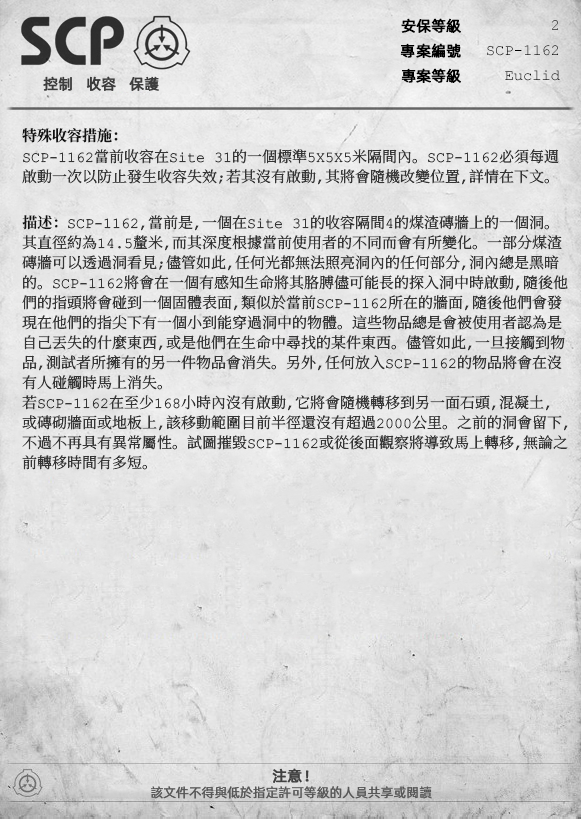
<style>
.page{position:relative;width:581px;height:819px}
.page>*{position:absolute;margin:0}
.t1{font:15px "AlibabaPuHuiTiR";color:#000000;font-weight:bold}
.t2{font:15px "AlibabaPuHuiTiR";color:#3d3d3d;font-weight:bold}
.t3{font:15px "ContainmentBreach-Bold";color:#121212}
.t4{font:15px/20px "ContainmentBreach-Regular";color:#353535}
.t5{font:15px/20px "ContainmentBreach-Bold";color:#121212}
.t6{font:15px "AlibabaPuHuiTiR";color:#414141;font-weight:bold}
.t7{font:13px "AlibabaPuHuiTiR";color:#575757}
</style>
<div class="page">
<p class="t1" style="left:401px;top:18px;width:60px;height:15px">安保等級</p>
<p class="t1" style="left:400px;top:43px;width:61px;height:15px">專案編號</p>
<p class="t2" style="left:43px;top:76px;width:116px;height:15px">控制   收容   保護</p>
<p class="t1" style="left:401px;top:68px;width:60px;height:15px">專案等級</p>
<p class="t3" style="left:22px;top:128px;width:96px;height:15px">特殊收容措施：</p>
<p class="t4" style="left:22px;top:149px;width:537px;height:36px">SCP-1162當前收容在Site 31的一個標準5X5X5米隔間內。SCP-1162必須每週<br>啟動一次以防止發生收容失效；若其沒有啟動，其將會隨機改變位置，詳情在下文。</p>
<p class="t4" style="left:22px;top:215px;width:546px;height:255px"><span class="t5">描述：</span>SCP-1162，當前是，一個在Site 31的收容隔間4的煤渣磚牆上的一個洞。<br>其直徑約為14.5釐米，而其深度根據當前使用者的不同而會有所變化。一部分煤渣<br>磚牆可以透過洞看見；儘管如此，任何光都無法照亮洞內的任何部分，洞內總是黑暗<br>的。SCP-1162將會在一個有感知生命將其胳膊儘可能長的探入洞中時啟動，隨後他<br>們的指頭將會碰到一個固體表面，類似於當前SCP-1162所在的牆面，隨後他們會發<br>現在他們的指尖下有一個小到能穿過洞中的物體。這些物品總是會被使用者認為是<br>自己丟失的什麼東西，或是他們在生命中尋找的某件東西。儘管如此，一旦接觸到物<br>品，測試者所擁有的另一件物品會消失。另外，任何放入SCP-1162的物品將會在沒<br>有人碰觸時馬上消失。<br>若SCP-1162在至少168小時內沒有啟動，它將會隨機轉移到另一面石頭，混凝土，<br>或磚砌牆面或地板上，該移動範圍目前半徑還沒有超過2000公里。之前的洞會留下，<br>不過不再具有異常屬性。試圖摧毀SCP-1162或從後面觀察將導致馬上轉移，無論之<br>前轉移時間有多短。</p>
<p class="t6" style="left:272px;top:768px;width:37px;height:15px">注意！</p>
<p class="t7" style="left:151px;top:786px;width:281px;height:13px">該文件不得與低於指定許可等級的人員共享或閱讀</p>
</div>
